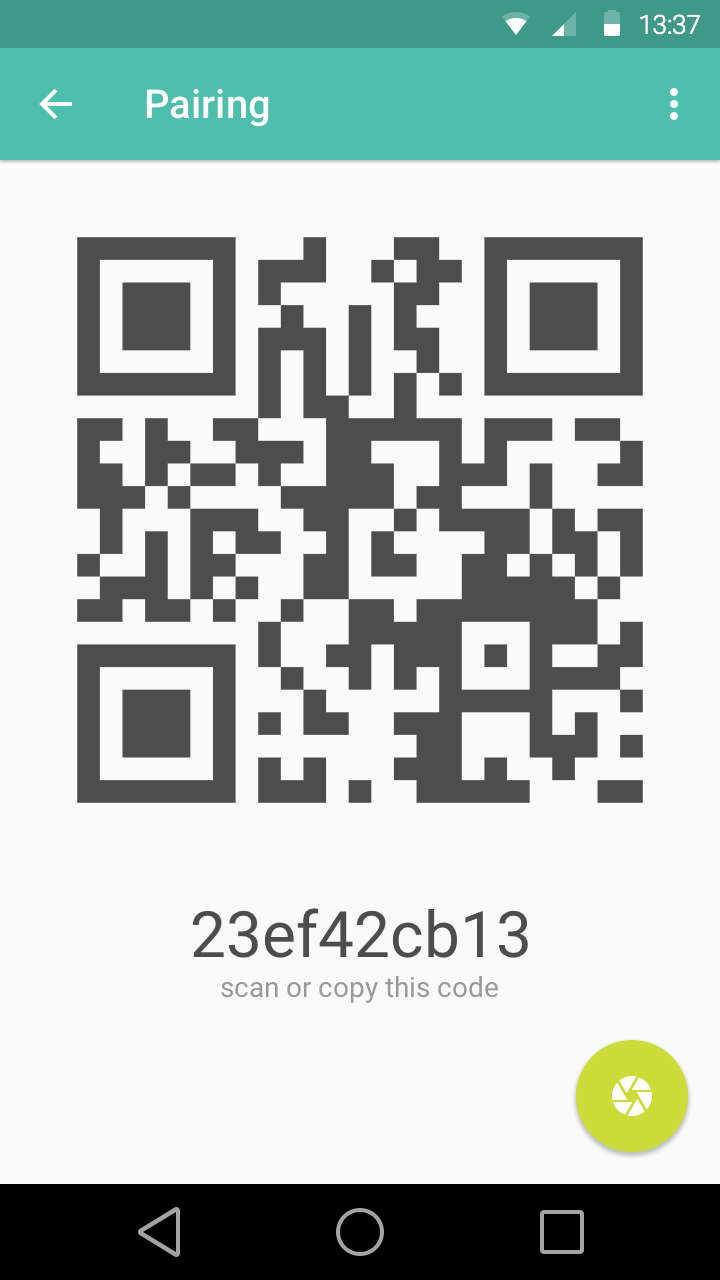
<style>
.page{position:relative;width:720px;height:1280px;background:#fafafa}
.page>*{position:absolute;margin:0}
.t1{font:26.1px "Roboto-Light";color:#ffffff}
.t2{font:40px "Roboto-Medium";color:#ffffff}
.t3{font:64px "Roboto-Regular";color:#4d4d4d}
.t4{font:28px "Roboto-Regular";color:#999999}
</style>
<div class="page">
<p class="t1" style="left:640px;top:14px;width:60px;height:21px">13:37</p>
<p class="t2" style="left:146px;top:88px;width:123px;height:39px">Pairing</p>
<p class="t3" style="left:192px;top:908px;width:336px;height:50px">23ef42cb13</p>
<p class="t4" style="left:221px;top:976px;width:277px;height:27px">scan or copy this code</p>
</div>
